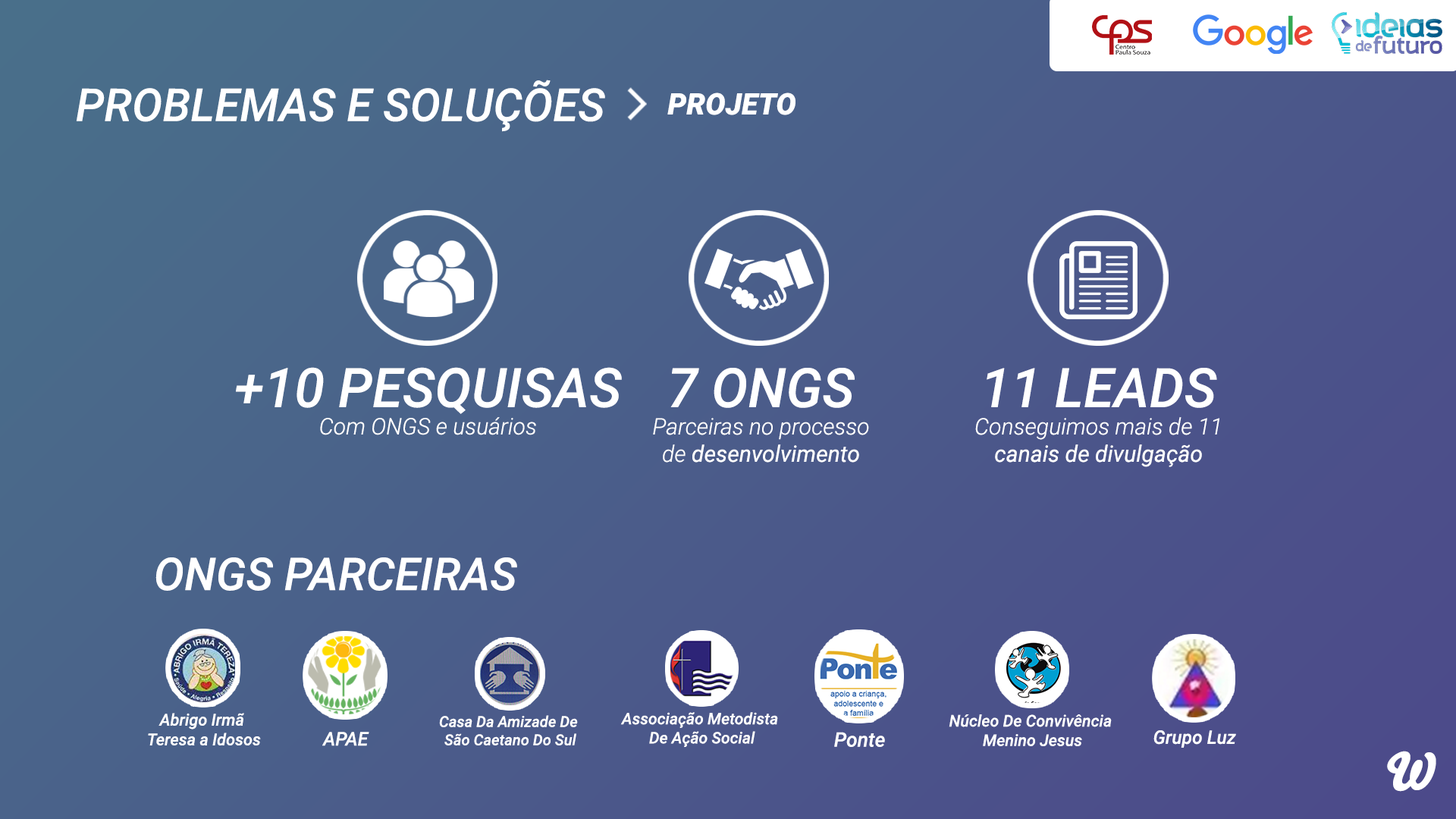
<style>
.page{position:relative;width:1456px;height:819px}
.page>*{position:absolute;margin:0}
.t1{font:45.5px "Roboto-MediumItalic";color:#ffffff}
.t2{font:29.7px "Roboto-BlackItalic";color:#ffffff}
.t3{font:22.7px "Roboto-LightItalic";color:#ffffff}
.t4{font:54.6px "Roboto-MediumItalic";color:#ffffff}
.t5{font:22.8px "Roboto-LightItalic";color:#ffffff}
.t6{font:22.8px "Roboto-Italic";color:#ffffff}
.t7{font:45.3px "Roboto-MediumItalic";color:#ffffff}
.t8{font:16.4px "Roboto-MediumItalic";color:#ffffff}
.t9{font:15.9px "Roboto-MediumItalic";color:#ffffff}
.t10{font:15.2px "Roboto-MediumItalic";color:#ffffff}
.t11{font:16.2px "Roboto-MediumItalic";color:#ffffff}
.t12{font:18.9px "Roboto-MediumItalic";color:#ffffff}
.t13{font:20.1px "Roboto-MediumItalic";color:#ffffff}
.t14{font:18.7px "Roboto-MediumItalic";color:#ffffff}
.t15{font:50.8px "Bello-Pro";color:#ffffff}
</style>
<div class="page">
<p class="t1" style="left:76px;top:80px;width:529px;height:52px">PROBLEMAS E SOLUÇÕES</p>
<p class="t2" style="left:667px;top:93px;width:128px;height:22px">PROJETO</p>
<p class="t3" style="left:236px;top:367px;width:386px;height:68px;text-align:center"><span class="t4">+10 PESQUISAS<br></span>Com ONGS e usuários</p>
<p class="t5" style="left:653px;top:368px;width:216px;height:95px;text-align:center"><span class="t4">7 ONGS<br></span>Parceiras no processo<br>de<span class="t6"> desenvolvimento</span></p>
<p class="t5" style="left:975px;top:368px;width:244px;height:99px;text-align:center"><span class="t4">11 LEADS<br></span>Conseguimos mais de 11<br><span class="t6">canais de divulgação</span></p>
<p class="t7" style="left:155px;top:557px;width:362px;height:34px">ONGS PARCEIRAS</p>
<p class="t8" style="left:148px;top:713px;width:113px;height:32px;text-align:center">Abrigo Irmã <br>Teresa a Idosos</p>
<p class="t9" style="left:620px;top:712px;width:158px;height:36px;text-align:center">Associação Metodista <br>De Ação Social</p>
<p class="t10" style="left:439px;top:715px;width:139px;height:30px;text-align:center">Casa Da Amizade De <br>São Caetano Do Sul</p>
<p class="t11" style="left:949px;top:714px;width:163px;height:32px;text-align:center">Núcleo De Convivência <br>Menino Jesus</p>
<p class="t12" style="left:322px;top:732px;width:47px;height:14px">APAE</p>
<p class="t13" style="left:834px;top:732px;width:51px;height:15px">Ponte</p>
<p class="t14" style="left:1153px;top:730px;width:83px;height:18px">Grupo Luz</p>
<p class="t15" style="left:1387px;top:751px;width:49px;height:41px">W</p>
</div>
